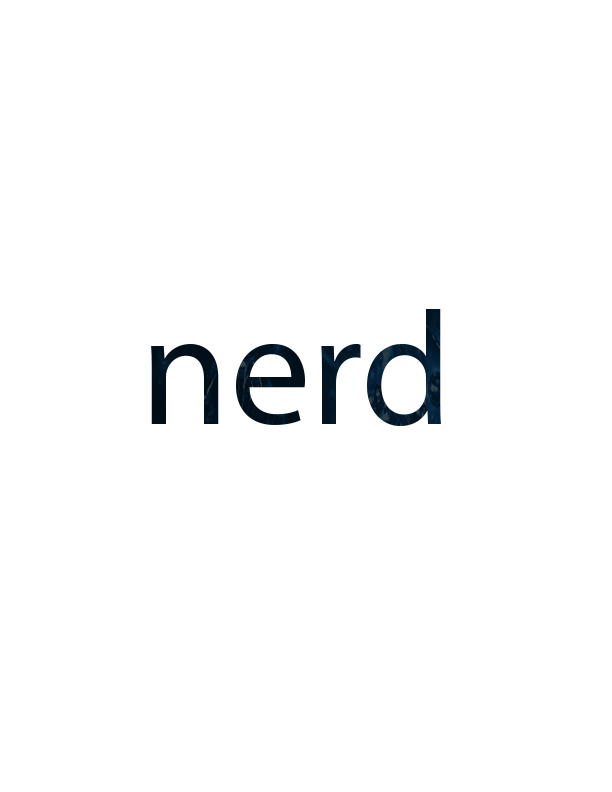
<style>
.page{position:relative;width:612px;height:792px;background:#ffffff}
.page>*{position:absolute;margin:0}
.t1{font:161.3px "MyriadPro-Regular";color:#021523}
</style>
<div class="page">
<p class="t1" style="left:151px;top:309px;width:290px;height:118px">nerd</p>
</div>
